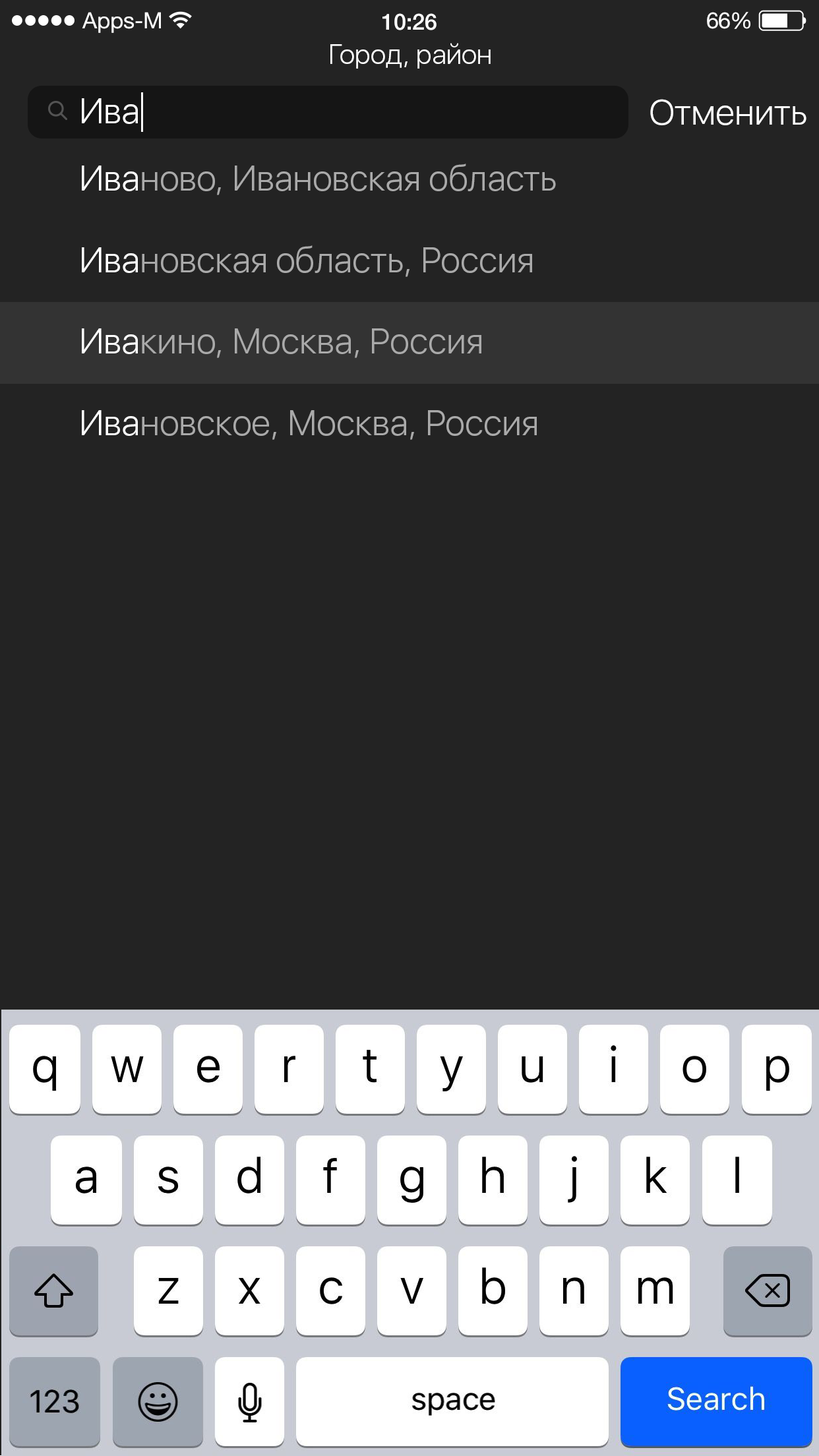
<style>
.page{position:relative;width:819px;height:1456px;background:#232323}
.page>*{position:absolute;margin:0}
.t1{font:22.5px "HelveticaNeue";color:#ffffff}
.t2{font:22.4px "HelveticaNeue-Medium";color:#ffffff}
.t3{font:22.5px "HelveticaNeue";letter-spacing:-0.02em;color:#ffffff}
.t4{font:27.7px "SFUIDisplay-Light";color:#ffffff}
.t5{font:35.6px "SFUIDisplay-Light";color:#ffffff}
.t6{font:35.6px "SFUIDisplay-Light";color:#aaaaaa}
</style>
<div class="page">
<p class="t1" style="left:82px;top:12px;width:79px;height:21px">Apps-M</p>
<p class="t2" style="left:382px;top:13px;width:55px;height:17px">10:26</p>
<p class="t1" style="left:707px;top:12px;width:43px;height:17px">6<span class="t3">6</span>%</p>
<p class="t4" style="left:330px;top:43px;width:161px;height:26px">Город, район</p>
<p class="t5" style="left:82px;top:98px;width:56px;height:26px">Ива</p>
<p class="t5" style="left:650px;top:99px;width:156px;height:26px">Отменить</p>
<p class="t6" style="left:82px;top:164px;width:474px;height:31px"><span class="t5">Ива</span>ново, Ивановская область</p>
<p class="t6" style="left:82px;top:245px;width:450px;height:32px"><span class="t5">Ива</span>новская область, Россия</p>
<p class="t6" style="left:82px;top:328px;width:399px;height:30px"><span class="t5">Ива</span>кино, Москва, Россия</p>
<p class="t6" style="left:82px;top:410px;width:455px;height:30px"><span class="t5">Ива</span>новское, Москва, Россия</p>
</div>
